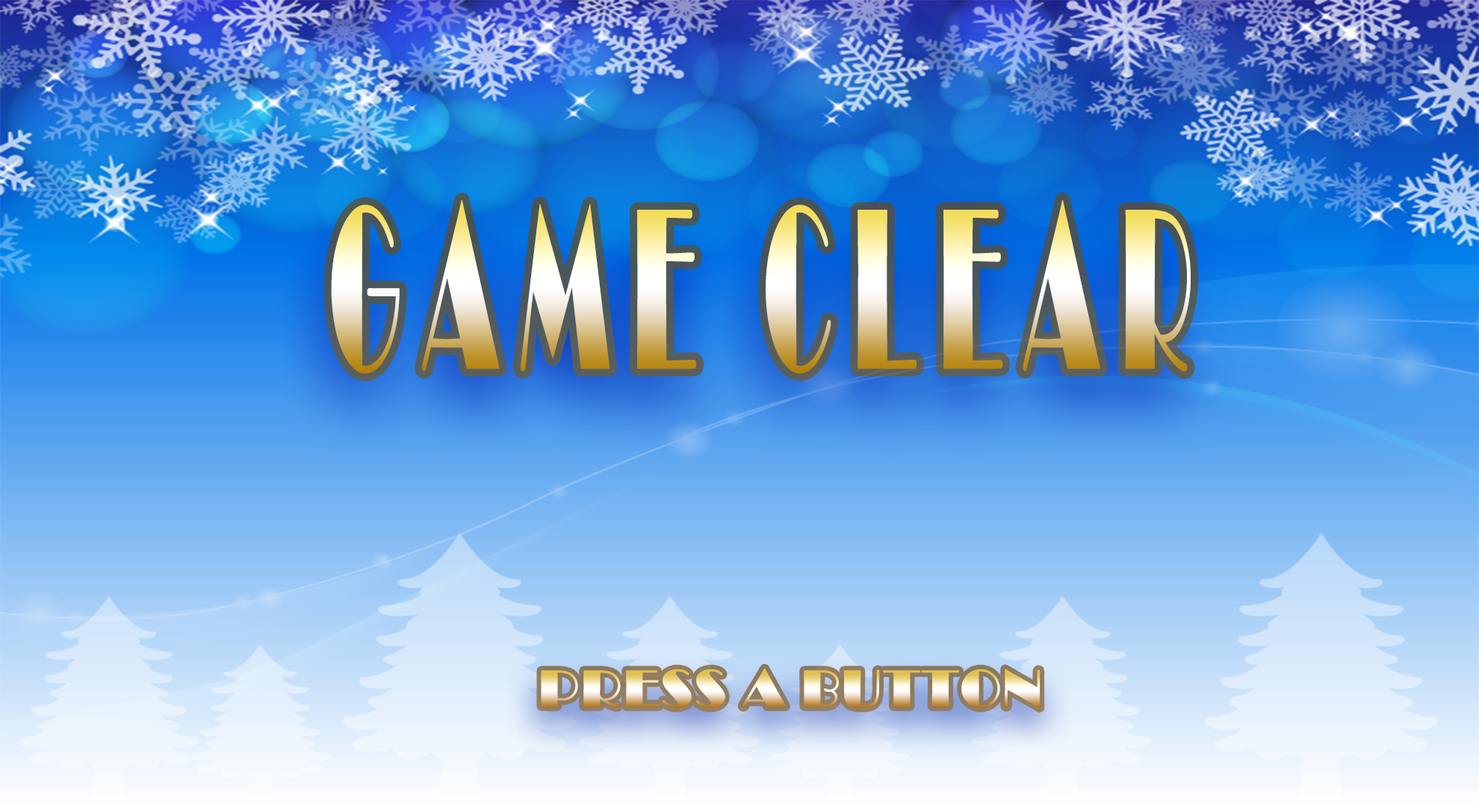
<style>
.page{position:relative;width:1479px;height:806px}
.page>*{position:absolute;margin:0}
.t1{font:238.2px "Broadway";letter-spacing:0.2em;font-weight:bold;scale:0.4 1}
.t2{font:53.8px "Broadway";font-weight:bold}
</style>
<div class="page">
<p class="t1" style="left:331px;top:200px;width:859px;height:174px">GAME CLEAR</p>
<p class="t2" style="left:541px;top:668px;width:499px;height:41px">PRESS A BUTTON</p>
</div>
